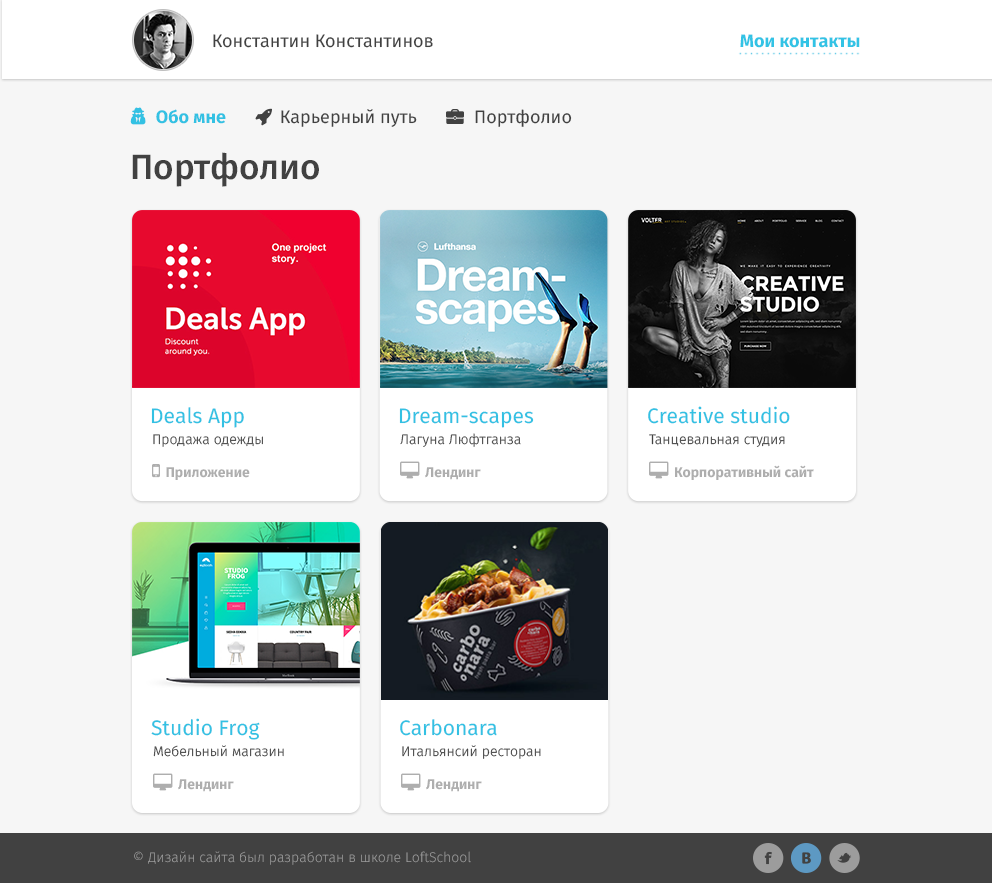
<style>
.page{position:relative;width:992px;height:883px;background:#f6f6f6}
.page>*{position:absolute;margin:0}
.t1{font:18px "FiraSans-Regular";color:#414141}
.t2{font:18px "FiraSans-Bold";color:#32c3e5}
.t3{font:35px "FiraSans-Medium";color:#414141}
.t4{font:21px "FiraSans-Regular";color:#33c1e3}
.t5{font:14px "FiraSans-Light";color:#414141}
.t6{font:14px "FiraSans-Light";color:#9c9c9c}
</style>
<div class="page">
<p class="t1" style="left:213px;top:34px;width:220px;height:14px">Константин Константинов</p>
<p class="t2" style="left:740px;top:34px;width:120px;height:14px">Мои контакты</p>
<p class="t1" style="left:475px;top:109px;width:97px;height:18px">Портфолио</p>
<p class="t3" style="left:132px;top:152px;width:187px;height:35px">Портфолио</p>
<p class="t4" style="left:151px;top:407px;width:93px;height:21px">Deals App</p>
<p class="t4" style="left:399px;top:408px;width:135px;height:20px">Dream-scapes</p>
<p class="t4" style="left:648px;top:406px;width:142px;height:18px">Creative studio</p>
<p class="t5" style="left:153px;top:434px;width:110px;height:13px">Продажа одежды</p>
<p class="t5" style="left:400px;top:433px;width:121px;height:14px">Лагуна Люфтганза</p>
<p class="t5" style="left:649px;top:434px;width:136px;height:13px">Танцевальная студия</p>
<p class="t4" style="left:151px;top:718px;width:109px;height:22px">Studio Frog</p>
<p class="t4" style="left:400px;top:719px;width:97px;height:17px">Carbonara</p>
<p class="t5" style="left:153px;top:745px;width:131px;height:12px">Мебельный магазин</p>
<p class="t5" style="left:402px;top:745px;width:139px;height:14px">Итальянсий ресторан</p>
<p class="t6" style="left:134px;top:851px;width:337px;height:14px">© Дизайн сайта был разработан в школе LoftSchool</p>
</div>
